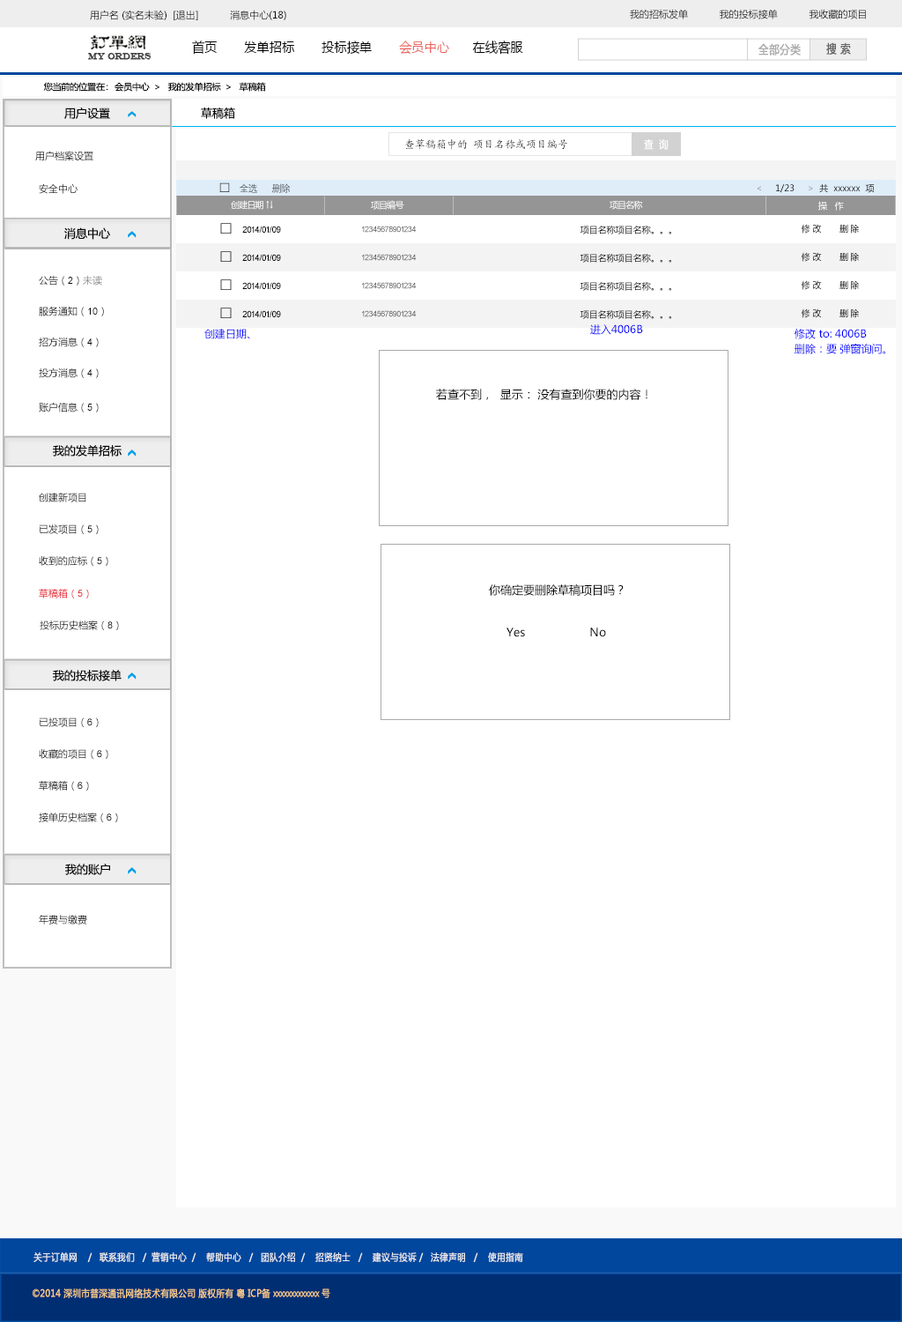
<style>
.page{position:relative;width:902px;height:1322px;background:#ffffff}
.page>*{position:absolute;margin:0}
.t1{font:9.7px "MicrosoftYaHei";color:#000000}
.t2{font:13.6px "MicrosoftYaHei";color:#000000;font-variant:small-caps;scale:0.94 1}
.t3{font:13.6px "MicrosoftYaHei";color:#ed6059;font-variant:small-caps;scale:0.94 1}
.t4{font:8.7px "EngraversMT";color:#434343;font-variant:small-caps;font-weight:bold;scale:0.86 1}
.t5{font:11.6px "MicrosoftYaHei";color:#aaaaaa;font-variant:small-caps;font-weight:bold;scale:0.86 1}
.t6{font:11.6px "MicrosoftYaHei";color:#626262;font-variant:small-caps;font-weight:bold;scale:0.86 1}
.t7{font:8.8px "MicrosoftYaHei";color:#060606}
.t8{font:11.5px "MicrosoftYaHei";color:#060606}
.t9{font:10.6px "KaiTi_GB2312";color:#000000}
.t10{font:10.7px "MicrosoftYaHei";color:#ffffff;font-variant:small-caps;font-weight:bold;scale:0.86 1}
.t11{font:9.7px "MicrosoftYaHei";color:#060606}
.t12{font:9.7px "MicrosoftYaHei"}
.t13{font:9.7px "STXihei"}
.t14{font:12.3px "STXihei"}
.t15{font:8.8px "MicrosoftYaHei";color:#ffffff}
.t16{font:8.8px "ArialMT";color:#020202}
.t17{font:14.1px "STXihei";color:#020202}
.t18{font:7.9px "ArialMT";color:#535353}
.t19{font:8.8px "MicrosoftYaHei";color:#000000}
.t20{font:8.8px "MicrosoftYaHei"}
.t21{font:9.7px "ArialMT";color:#060606}
.t22{font:9.7px "MicrosoftYaHei";color:#888584}
.t23{font:10.6px "MicrosoftYaHei";color:#0000ff}
.t24{font:10.6px/14.1px "MicrosoftYaHei";color:#0000ff}
.t25{font:11.5px "MicrosoftYaHei";color:#000000}
.t26{font:9.7px "ArialMT";color:#000000}
.t27{font:9.7px "MicrosoftYaHei";color:#e60012}
.t28{font:9.7px "ArialMT";color:#e60012}
.t29{font:9.7px "MicrosoftYaHei";color:#eeeeee;font-variant:small-caps;font-weight:bold;scale:0.86 1}
.t30{font:13.6px "STXihei";color:#eeeeee;font-variant:small-caps;font-weight:bold;scale:0.86 1}
.t31{font:9.7px "MicrosoftYaHei";color:#facd89;font-variant:small-caps;font-weight:bold;scale:0.87 1}
.t32{font:9.7px "MicrosoftYaHei";color:#eeeeee;font-variant:small-caps;font-weight:bold;scale:0.87 1}
</style>
<div class="page">
<p class="t1" style="left:90px;top:10px;width:196px;height:10px">用户名 (实名未验)  [退出]           消息中心(18)</p>
<p class="t1" style="left:630px;top:9px;width:236px;height:10px">我的招标发单           我的投标接单           我收藏的项目</p>
<p class="t2" style="left:192px;top:41px;width:331px;height:14px">首页       发单招标       投标接单       <span class="t3">会员中心</span>      在线客服</p>
<p class="t4" style="left:88px;top:53px;width:64px;height:7px">MY ORDERS</p>
<p class="t5" style="left:759px;top:43px;width:42px;height:13px">全部分类</p>
<p class="t6" style="left:826px;top:42px;width:25px;height:13px">搜 索</p>
<p class="t7" style="left:43px;top:82px;width:223px;height:10px">您当前的位置在：  会员中心  &gt;   我的发单招标  &gt;   草稿箱</p>
<p class="t8" style="left:64px;top:107px;width:46px;height:12px">用户设置</p>
<p class="t8" style="left:201px;top:107px;width:34px;height:12px">草稿箱</p>
<p class="t9" style="left:405px;top:138px;width:162px;height:12px">查草稿箱中的 项目名称或项目编号</p>
<p class="t10" style="left:644px;top:139px;width:25px;height:11px">查  询</p>
<p class="t11" style="left:35px;top:151px;width:58px;height:10px">用户档案设置</p>
<p class="t12" style="left:39px;top:183px;width:39px;height:11px">安全中心</p>
<p class="t13" style="left:219px;top:182px;width:72px;height:11px"><span class="t14">□   </span>全选      删除</p>
<p class="t7" style="left:757px;top:184px;width:118px;height:9px">&lt;     1/23     &gt;  共  xxxxxx  项</p>
<p class="t15" style="left:231px;top:200px;width:42px;height:10px">创建日期 ↑↓</p>
<p class="t15" style="left:371px;top:200px;width:33px;height:10px">项目编号</p>
<p class="t15" style="left:610px;top:200px;width:33px;height:10px">项目名称</p>
<p class="t15" style="left:819px;top:201px;width:25px;height:10px">操   作</p>
<p class="t8" style="left:64px;top:227px;width:46px;height:13px">消息中心</p>
<p class="t16" style="left:220px;top:223px;width:61px;height:10px"><span class="t17">□   </span>2014/01/09</p>
<p class="t18" style="left:362px;top:226px;width:54px;height:7px">12345678901234</p>
<p class="t19" style="left:580px;top:226px;width:91px;height:8px">项目名称项目名称。。。</p>
<p class="t20" style="left:801px;top:224px;width:59px;height:9px">修 改       删 除</p>
<p class="t16" style="left:220px;top:251px;width:61px;height:11px"><span class="t17">□   </span>2014/01/09</p>
<p class="t18" style="left:362px;top:254px;width:54px;height:7px">12345678901234</p>
<p class="t19" style="left:580px;top:254px;width:91px;height:9px">项目名称项目名称。。。</p>
<p class="t20" style="left:801px;top:252px;width:59px;height:10px">修 改       删 除</p>
<p class="t11" style="left:39px;top:275px;width:63px;height:10px">公告（<span class="t21">2</span>）<span class="t22">未读</span></p>
<p class="t16" style="left:220px;top:279px;width:61px;height:11px"><span class="t17">□   </span>2014/01/09</p>
<p class="t18" style="left:362px;top:282px;width:54px;height:7px">12345678901234</p>
<p class="t19" style="left:580px;top:282px;width:91px;height:9px">项目名称项目名称。。。</p>
<p class="t20" style="left:801px;top:280px;width:59px;height:10px">修 改       删 除</p>
<p class="t11" style="left:39px;top:306px;width:65px;height:10px">服务通知（<span class="t21">10</span>）</p>
<p class="t16" style="left:220px;top:308px;width:61px;height:10px"><span class="t17">□   </span>2014/01/09</p>
<p class="t18" style="left:362px;top:310px;width:54px;height:7px">12345678901234</p>
<p class="t19" style="left:580px;top:310px;width:91px;height:9px">项目名称项目名称。。。</p>
<p class="t20" style="left:801px;top:308px;width:59px;height:10px">修 改       删 除</p>
<p class="t23" style="left:204px;top:329px;width:46px;height:10px">创建日期、</p>
<p class="t23" style="left:590px;top:324px;width:53px;height:11px">进入4006B</p>
<p class="t24" style="left:795px;top:329px;width:90px;height:25px">修改 to: 4006B<br>删除：要 弹窗询问。</p>
<p class="t11" style="left:39px;top:337px;width:60px;height:10px">招方消息（<span class="t21">4</span>）</p>
<p class="t11" style="left:39px;top:367px;width:60px;height:11px">投方消息（<span class="t21">4</span>）</p>
<p class="t25" style="left:436px;top:389px;width:212px;height:11px">若查不到，  显示： 没有查到你要的内容！</p>
<p class="t11" style="left:39px;top:402px;width:60px;height:10px">账户信息（<span class="t21">5</span>）</p>
<p class="t8" style="left:53px;top:445px;width:69px;height:11px">我的发单招标</p>
<p class="t12" style="left:39px;top:493px;width:47px;height:9px">创建新项目</p>
<p class="t1" style="left:39px;top:524px;width:60px;height:10px">已发项目（<span class="t26">5</span>）</p>
<p class="t1" style="left:39px;top:556px;width:69px;height:10px">收到的应标（<span class="t26">5</span>）</p>
<p class="t27" style="left:39px;top:589px;width:50px;height:9px">草稿箱（<span class="t28">5</span>）</p>
<p class="t25" style="left:489px;top:584px;width:135px;height:12px">你确定要删除草稿项目吗？</p>
<p class="t11" style="left:40px;top:620px;width:79px;height:10px">投标历史档案（<span class="t21">8</span>）</p>
<p class="t25" style="left:507px;top:627px;width:99px;height:10px">Yes                   No</p>
<p class="t8" style="left:53px;top:670px;width:69px;height:11px">我的投标接单</p>
<p class="t11" style="left:39px;top:717px;width:60px;height:10px">已投项目（<span class="t21">6</span>）</p>
<p class="t11" style="left:39px;top:749px;width:69px;height:10px">收藏的项目（<span class="t21">6</span>）</p>
<p class="t11" style="left:39px;top:781px;width:50px;height:9px">草稿箱（<span class="t21">6</span>）</p>
<p class="t11" style="left:39px;top:812px;width:79px;height:10px">接单历史档案（<span class="t21">6</span>）</p>
<p class="t8" style="left:65px;top:863px;width:45px;height:12px">我的账户</p>
<p class="t11" style="left:39px;top:915px;width:48px;height:9px">年费与缴费</p>
<p class="t29" style="left:33px;top:1251px;width:490px;height:11px"><span class="t30"><br><br></span>关于订单网    /   联系我们   /  营销中心  /    帮助中心   /   团队介绍  /    招贤纳士   /    建议与投诉 /   法律声明   /    使用指南</p>
<p class="t31" style="left:33px;top:1288px;width:297px;height:10px"><span class="t32"> </span>©2014 深圳市普深通讯网络技术有限公司 版权所有 粤 ICP备 xxxxxxxxxxxxx 号</p>
</div>
